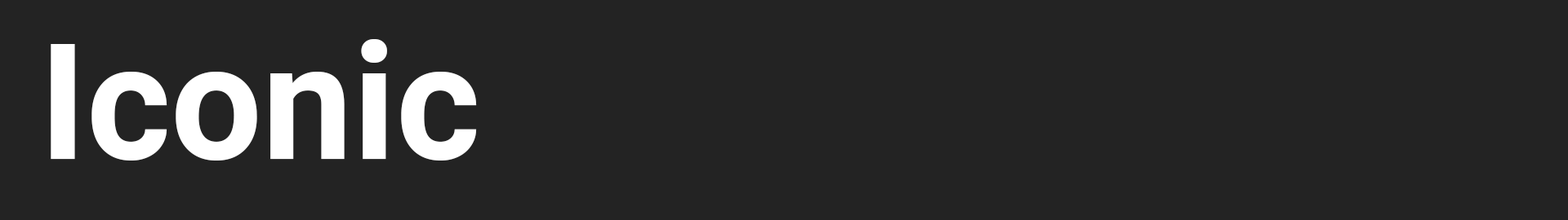
<style>
.page{position:relative;width:1568px;height:220px;background:#232323}
.page>*{position:absolute;margin:0}
.t1{font:161.9px "Roboto-Bold";color:#ffffff}
</style>
<div class="page">
<p class="t1" style="left:51px;top:39px;width:426px;height:122px">Iconic</p>
</div>
